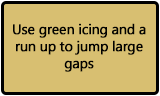
<style>
.page{position:relative;width:160px;height:96px;background:#d8bf71}
.page>*{position:absolute;margin:0}
.t1{font:14px "SegoeUI";letter-spacing:-0.025em;color:#010101;font-weight:bold}
</style>
<div class="page">
<p class="t1" style="left:13px;top:23px;width:133px;height:49px;text-align:center">Use green icing and a run up to jump large gaps</p>
</div>
